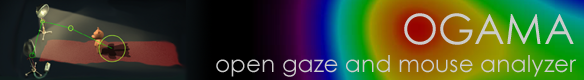
<style>
.page{position:relative;width:584px;height:80px}
.page>*{position:absolute;margin:0}
.t1{font:41.7px "CenturyGothic";color:#cccccc}
.t2{font:23.3px "CenturyGothic";color:#cccccc}
</style>
<div class="page">
<p class="t1" style="left:404px;top:13px;width:170px;height:32px">OGAMA</p>
<p class="t2" style="left:216px;top:55px;width:361px;height:22px">open gaze and mouse analyzer</p>
</div>
